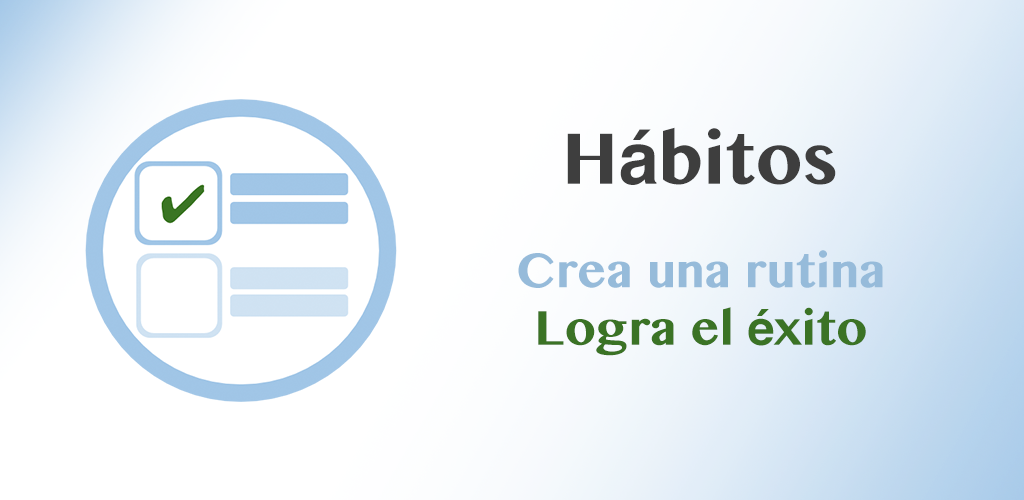
<style>
.page{position:relative;width:1024px;height:500px;background:#ffffff}
.page>*{position:absolute;margin:0}
.t1{font:72px "TamilMN-Bold";color:#3e3e3e}
.t2{font:72px "Helvetica-Bold";color:#3e3e3e}
.t3{font:48px "TamilMN-Bold";color:#96bbda}
.t4{font:48px "TamilMN-Bold";color:#3b7325}
.t5{font:48px "Helvetica-Bold";color:#3b7325}
</style>
<div class="page">
<p class="t1" style="left:567px;top:127px;width:269px;height:58px">H<span class="t2">á</span>bitos</p>
<p class="t3" style="left:518px;top:250px;width:365px;height:106px;text-align:center">Crea una rutina<br><span class="t4">Logra el </span><span class="t5">é</span><span class="t4">xito</span></p>
</div>
